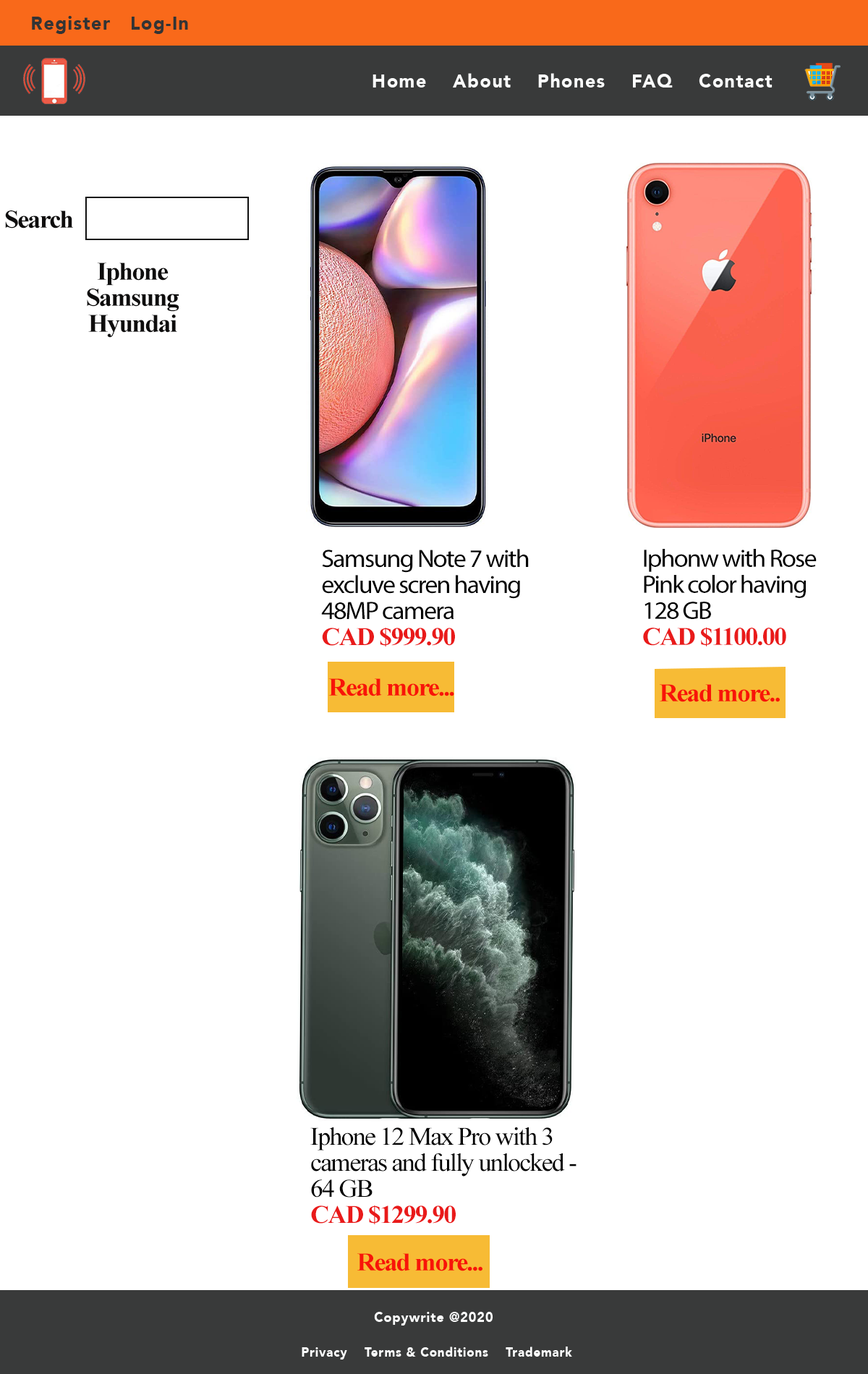
<style>
.page{position:relative;width:868px;height:1374px;background:#ffffff}
.page>*{position:absolute;margin:0}
.t1{font:19.1px "Avenir-Black";letter-spacing:0.05em;color:#333435;scale:0.96 1}
.t2{font:19.1px "Avenir-Black";letter-spacing:0.05em;color:#fbfcfc;scale:0.96 1}
.t3{font:25.3px/26px "TimesNewRomanPS-BoldMT";letter-spacing:-0.05em;color:#0e0d0d;scale:1.03 1}
.t4{font:25.3px/26px "MyriadPro-Regular";letter-spacing:-0.05em;color:#000000;scale:1.03 1}
.t5{font:25.3px/26px "TimesNewRomanPS-BoldMT";letter-spacing:-0.05em;color:#e91a1a;scale:1.03 1}
.t6{font:25.3px "TimesNewRomanPS-BoldMT";letter-spacing:-0.05em;color:#f81409;scale:1.03 1}
.t7{font:25.3px/26px "TimesNewRomanPSMT";letter-spacing:-0.05em;color:#010101;scale:1.03 1}
.t8{font:13.5px "Avenir-Black";letter-spacing:0.05em;color:#fcfdfd;scale:0.96 1}
.t9{font:12.7px "Avenir-Black";letter-spacing:0.05em;color:#fcfdfd;scale:0.96 1}
</style>
<div class="page">
<p class="t1" style="left:32px;top:16px;width:156px;height:18px">Register   Log-In</p>
<p class="t2" style="left:372px;top:73px;width:400px;height:15px">Home    About    Phones    FAQ    Contact</p>
<p class="t3" style="left:5px;top:210px;width:174px;height:128px">Search<br><br>Iphone<br>Samsung<br>Hyundai</p>
<p class="t4" style="left:321px;top:549px;width:208px;height:98px">Samsung Note 7 with excluve scren having 48MP camera<br><span class="t5">CAD $999.90</span></p>
<p class="t4" style="left:643px;top:549px;width:173px;height:98px">Iphonw with Rose Pink color having <br>128 GB<br><span class="t5">CAD $1100.00</span></p>
<p class="t6" style="left:328px;top:678px;width:126px;height:18px">Read more...</p>
<p class="t6" style="left:660px;top:684px;width:120px;height:18px">Read more..</p>
<p class="t7" style="left:310px;top:1127px;width:266px;height:97px">Iphone 12 Max Pro with 3 cameras and fully unlocked - 64 GB<br><span class="t5">CAD $1299.90</span></p>
<p class="t6" style="left:357px;top:1253px;width:125px;height:18px">Read more...</p>
<p class="t8" style="left:374px;top:1312px;width:119px;height:14px">Copywrite @2020</p>
<p class="t9" style="left:302px;top:1347px;width:270px;height:13px">Privacy    Terms &amp; Conditions    Trademark</p>
</div>
